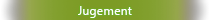
<style>
.page{position:relative;width:209px;height:20px}
.page>*{position:absolute;margin:0}
.t1{font:12.5px "LaoUI";color:#fefefe}
</style>
<div class="page">
<p class="t1" style="left:78px;top:6px;width:54px;height:12px">Jugement</p>
</div>
